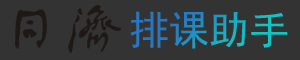
<style>
.page{position:relative;width:300px;height:60px;background:#333333}
.page>*{position:absolute;margin:0}
.t1{font:40px "SimHei"}
</style>
<div class="page">
<p class="t1" style="left:130px;top:11px;width:158px;height:38px">排课助手</p>
</div>
